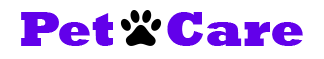
<style>
.page{position:relative;width:324px;height:59px;background:#ffffff}
.page>*{position:absolute;margin:0}
.t1{font:12px "Rockwell-ExtraBold";color:#6200ea}
</style>
<div class="page">
<p class="t1" style="left:21px;top:12px;width:282px;height:34px">Pet    Care</p>
</div>
